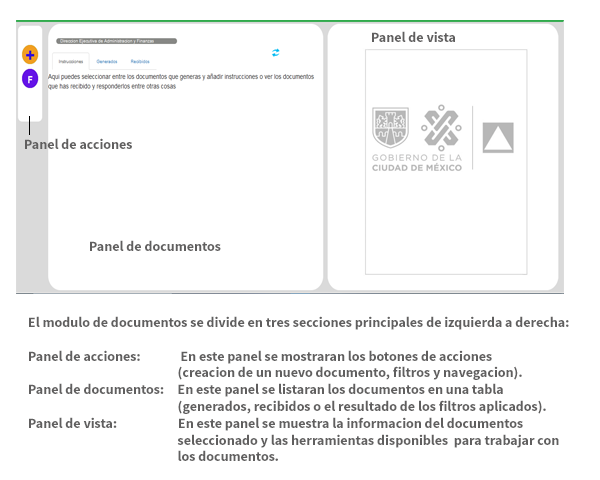
<style>
.page{position:relative;width:600px;height:480px;background:#ffffff}
.page>*{position:absolute;margin:0}
.t1{font:14px "SourceSansPro-Bold";color:#605f5f}
</style>
<div class="page">
<p class="t1" style="left:372px;top:31px;width:83px;height:11px">Panel de vista</p>
<p class="t1" style="left:25px;top:138px;width:107px;height:11px">Panel de acciones</p>
<p class="t1" style="left:90px;top:240px;width:131px;height:11px">Panel de documentos</p>
<p class="t1" style="left:29px;top:316px;width:540px;height:145px">El modulo de documentos se divide en tres secciones principales de izquierda a derecha:<br><br>Panel de acciones:    En este panel se mostraran los botones de acciones  <br>               (creacion de un nuevo documento, filtros y navegacion).<br>Panel de documentos:   En este panel se listaran los documentos en una tabla <br>               (generados, recibidos o el resultado de los filtros aplicados). <br>Panel de vista:                 En este panel se muestra la informacion del documentos <br>      seleccionado y las herramientas disponibles  para trabajar con <br>      los documentos.</p>
</div>
